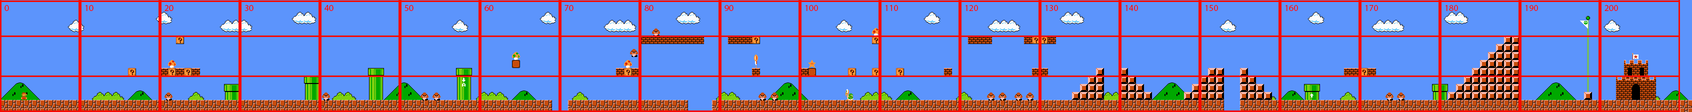
<style>
.page{position:relative;width:1692px;height:112px;background:#5c94fc}
.page>*{position:absolute;margin:0}
.t1{font:9px "MyriadPro-Regular";color:#f60a01}
</style>
<div class="page">
<p class="t1" style="left:4px;top:5px;width:5px;height:6px">0</p>
<p class="t1" style="left:85px;top:5px;width:9px;height:6px">10</p>
<p class="t1" style="left:164px;top:5px;width:10px;height:6px">20</p>
<p class="t1" style="left:244px;top:5px;width:10px;height:6px">30</p>
<p class="t1" style="left:324px;top:5px;width:10px;height:6px">40</p>
<p class="t1" style="left:404px;top:5px;width:10px;height:6px">50</p>
<p class="t1" style="left:484px;top:5px;width:10px;height:6px">60</p>
<p class="t1" style="left:564px;top:5px;width:10px;height:6px">70</p>
<p class="t1" style="left:644px;top:5px;width:10px;height:6px">80</p>
<p class="t1" style="left:724px;top:5px;width:10px;height:6px">90</p>
<p class="t1" style="left:805px;top:5px;width:13px;height:6px">100</p>
<p class="t1" style="left:885px;top:5px;width:13px;height:6px">110</p>
<p class="t1" style="left:965px;top:5px;width:13px;height:6px">120</p>
<p class="t1" style="left:1045px;top:5px;width:13px;height:6px">130</p>
<p class="t1" style="left:1125px;top:5px;width:13px;height:6px">140</p>
<p class="t1" style="left:1205px;top:5px;width:13px;height:6px">150</p>
<p class="t1" style="left:1285px;top:5px;width:13px;height:6px">160</p>
<p class="t1" style="left:1365px;top:5px;width:13px;height:6px">170</p>
<p class="t1" style="left:1445px;top:5px;width:13px;height:6px">180</p>
<p class="t1" style="left:1525px;top:5px;width:13px;height:6px">190</p>
<p class="t1" style="left:1604px;top:5px;width:14px;height:6px">200</p>
</div>
